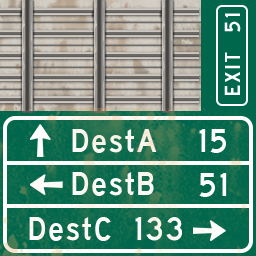
<style>
.page{position:relative;width:256px;height:256px}
.page>*{position:absolute;margin:0}
.t1{font:20px "traffic03";letter-spacing:0.05em;color:#ffffff}
.t2{font:30px "traffic03";letter-spacing:0.05em;color:#ffffff}
</style>
<div class="page">
<p class="t1" style="left:224px;top:13px;width:17px;height:19px;rotate:-90deg">51</p>
<p class="t1" style="left:224px;top:52px;width:16px;height:43px;rotate:-90deg">EXIT</p>
<p class="t2" style="left:72px;top:129px;width:85px;height:24px">DestA</p>
<p class="t2" style="left:199px;top:129px;width:27px;height:24px">15</p>
<p class="t2" style="left:72px;top:172px;width:82px;height:24px">DestB</p>
<p class="t2" style="left:199px;top:173px;width:28px;height:24px">51</p>
<p class="t2" style="left:29px;top:217px;width:82px;height:24px">DestC</p>
<p class="t2" style="left:135px;top:217px;width:47px;height:24px">133</p>
</div>
